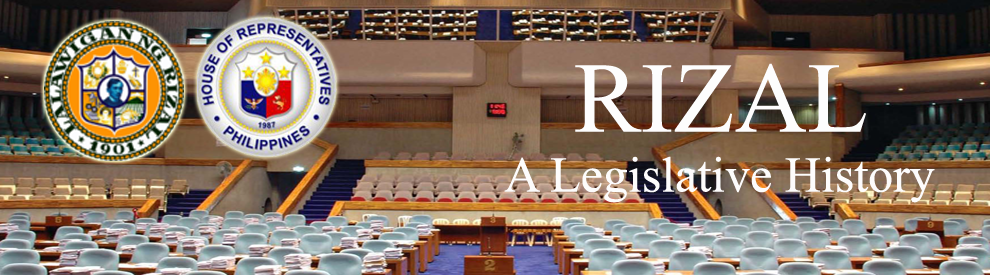
<style>
.page{position:relative;width:990px;height:275px}
.page>*{position:absolute;margin:0}
.t1{font:50px "TimesNewRomanPSMT";color:#fdfcfc}
.t2{font:100px "TimesNewRomanPSMT";color:#fdfdfd}
</style>
<div class="page">
<p class="t1" style="left:504px;top:63px;width:431px;height:140px;text-align:center"><span class="t2">RIZAL<br></span>A Legislative History</p>
</div>
